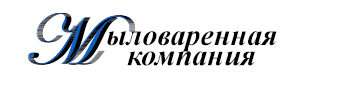
<style>
.page{position:relative;width:360px;height:91px;background:#ffffff}
.page>*{position:absolute;margin:0}
.t1{font:72px "EdwardianScriptITC";color:#0d61be}
.t2{font:72px "EdwardianScriptITC"}
.t3{font:72px "EdwardianScriptITC";color:#010000}
.t4{font:30px "TimesNewRomanPS-BoldItalicMT";color:#000000}
</style>
<div class="page">
<p class="t1" style="left:28px;top:13px;width:102px;height:52px">M</p>
<p class="t2" style="left:29px;top:13px;width:102px;height:52px">M</p>
<p class="t2" style="left:30px;top:13px;width:102px;height:52px">M</p>
<p class="t3" style="left:31px;top:13px;width:102px;height:52px">M</p>
<p class="t3" style="left:32px;top:13px;width:102px;height:52px">M</p>
<p class="t3" style="left:33px;top:13px;width:102px;height:52px">M</p>
<p class="t4" style="left:107px;top:31px;width:170px;height:21px">ыловаренная</p>
<p class="t4" style="left:127px;top:51px;width:128px;height:15px">компания</p>
</div>
